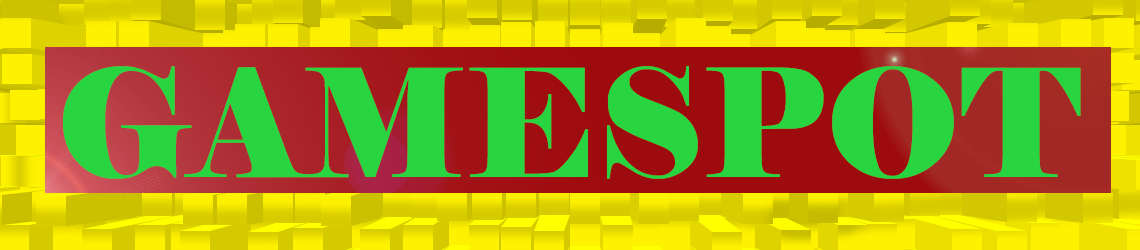
<style>
.page{position:relative;width:1140px;height:250px}
.page>*{position:absolute;margin:0}
.t1{font:150px "Elephant-Regular";color:#28d540}
</style>
<div class="page">
<p class="t1" style="left:62px;top:66px;width:1019px;height:113px">GAMESPOT</p>
</div>
